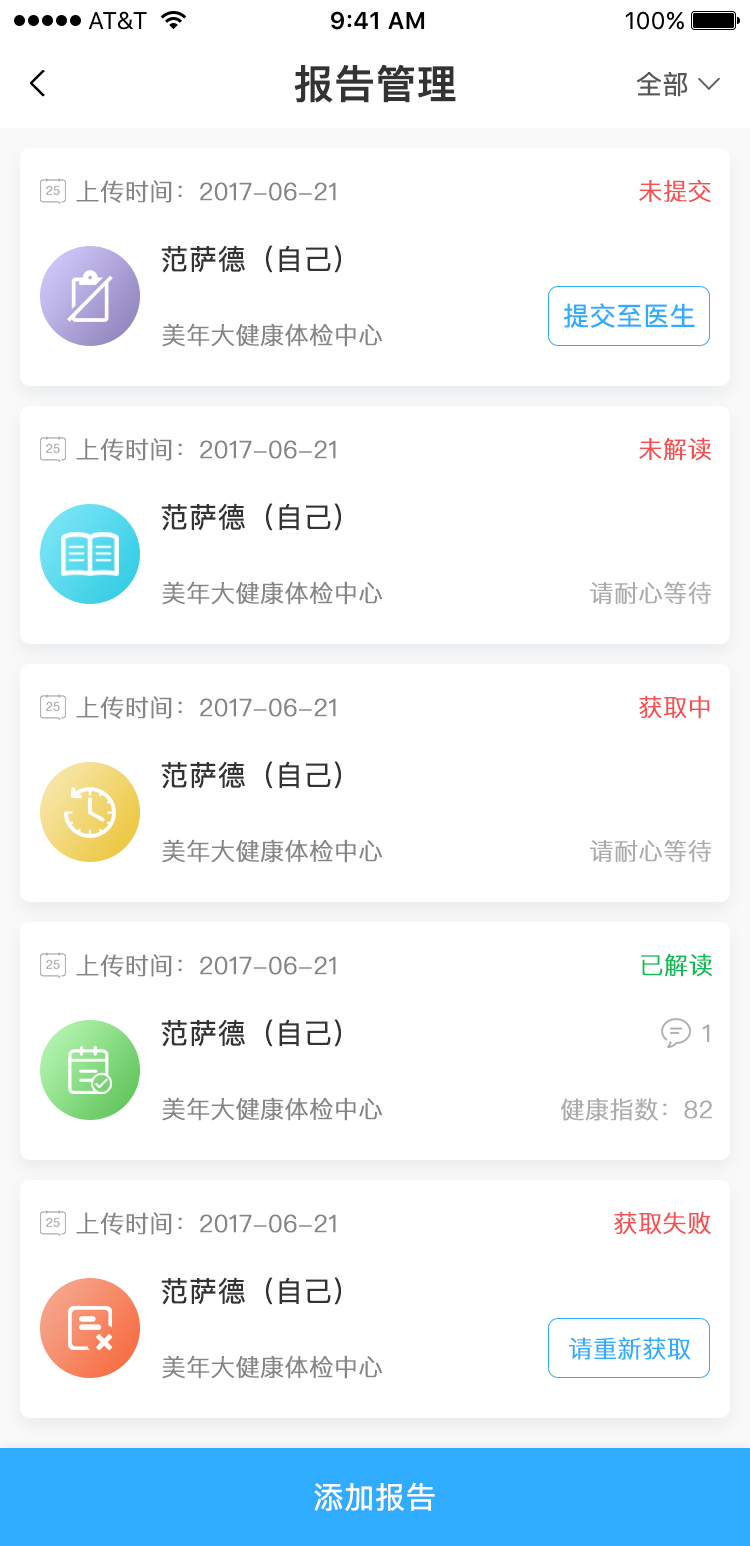
<style>
.page{position:relative;width:750px;height:1546px;background:#ffffff}
.page>*{position:absolute;margin:0}
.t1{font:40px "PingFangSC-Medium";color:#333333;font-weight:bold}
.t2{font:26px "PingFangSC-Regular";color:#575757;font-weight:bold}
.t3{font:24px "PingFangSC-Light";color:#858585;font-weight:bold}
.t4{font:24px "PingFangSC-Light";color:#f54f52;font-weight:bold}
.t5{font:28px "PingFangSC-Regular";color:#333333;font-weight:bold}
.t6{font:26px "PingFangSC-Regular";color:#30acff;font-weight:bold}
.t7{font:24px "PingFangSC-Light";color:#ababab;font-weight:bold}
.t8{font:24px "PingFangSC-Light";color:#0dbd54;font-weight:bold}
.t9{font:24px "PingFangSC-Light";color:#30acff;font-weight:bold}
.t10{font:30px "PingFangSC-Regular";color:#ffffff;font-weight:bold}
</style>
<div class="page">
<p class="t1" style="left:294px;top:64px;width:162px;height:39px">报告管理</p>
<p class="t2" style="left:636px;top:71px;width:52px;height:26px">全部</p>
<p class="t3" style="left:76px;top:180px;width:260px;height:23px">上传时间：2017-06-21</p>
<p class="t4" style="left:639px;top:179px;width:72px;height:23px">未提交</p>
<p class="t5" style="left:161px;top:245px;width:180px;height:28px">范萨德（自己）</p>
<p class="t6" style="left:564px;top:303px;width:131px;height:25px">提交至医生</p>
<p class="t3" style="left:162px;top:323px;width:220px;height:24px">美年大健康体检中心</p>
<p class="t3" style="left:76px;top:438px;width:260px;height:23px">上传时间：2017-06-21</p>
<p class="t4" style="left:639px;top:437px;width:72px;height:24px">未解读</p>
<p class="t5" style="left:161px;top:503px;width:180px;height:28px">范萨德（自己）</p>
<p class="t3" style="left:162px;top:581px;width:220px;height:24px">美年大健康体检中心</p>
<p class="t7" style="left:590px;top:581px;width:121px;height:23px">请耐心等待</p>
<p class="t3" style="left:76px;top:696px;width:260px;height:23px">上传时间：2017-06-21</p>
<p class="t4" style="left:639px;top:695px;width:71px;height:24px">获取中</p>
<p class="t5" style="left:161px;top:761px;width:180px;height:28px">范萨德（自己）</p>
<p class="t3" style="left:162px;top:839px;width:220px;height:24px">美年大健康体检中心</p>
<p class="t7" style="left:590px;top:839px;width:121px;height:23px">请耐心等待</p>
<p class="t8" style="left:641px;top:953px;width:71px;height:24px">已解读</p>
<p class="t3" style="left:76px;top:954px;width:260px;height:23px">上传时间：2017-06-21</p>
<p class="t5" style="left:161px;top:1019px;width:180px;height:28px">范萨德（自己）</p>
<p class="t7" style="left:702px;top:1024px;width:8px;height:18px">1</p>
<p class="t3" style="left:162px;top:1097px;width:220px;height:24px">美年大健康体检中心</p>
<p class="t7" style="left:561px;top:1098px;width:151px;height:23px">健康指数：82</p>
<p class="t3" style="left:76px;top:1212px;width:260px;height:23px">上传时间：2017-06-21</p>
<p class="t4" style="left:614px;top:1211px;width:97px;height:24px">获取失败</p>
<p class="t5" style="left:161px;top:1277px;width:180px;height:28px">范萨德（自己）</p>
<p class="t9" style="left:569px;top:1337px;width:122px;height:23px">请重新获取</p>
<p class="t3" style="left:162px;top:1355px;width:220px;height:24px">美年大健康体检中心</p>
<p class="t10" style="left:314px;top:1482px;width:121px;height:29px">添加报告</p>
</div>
